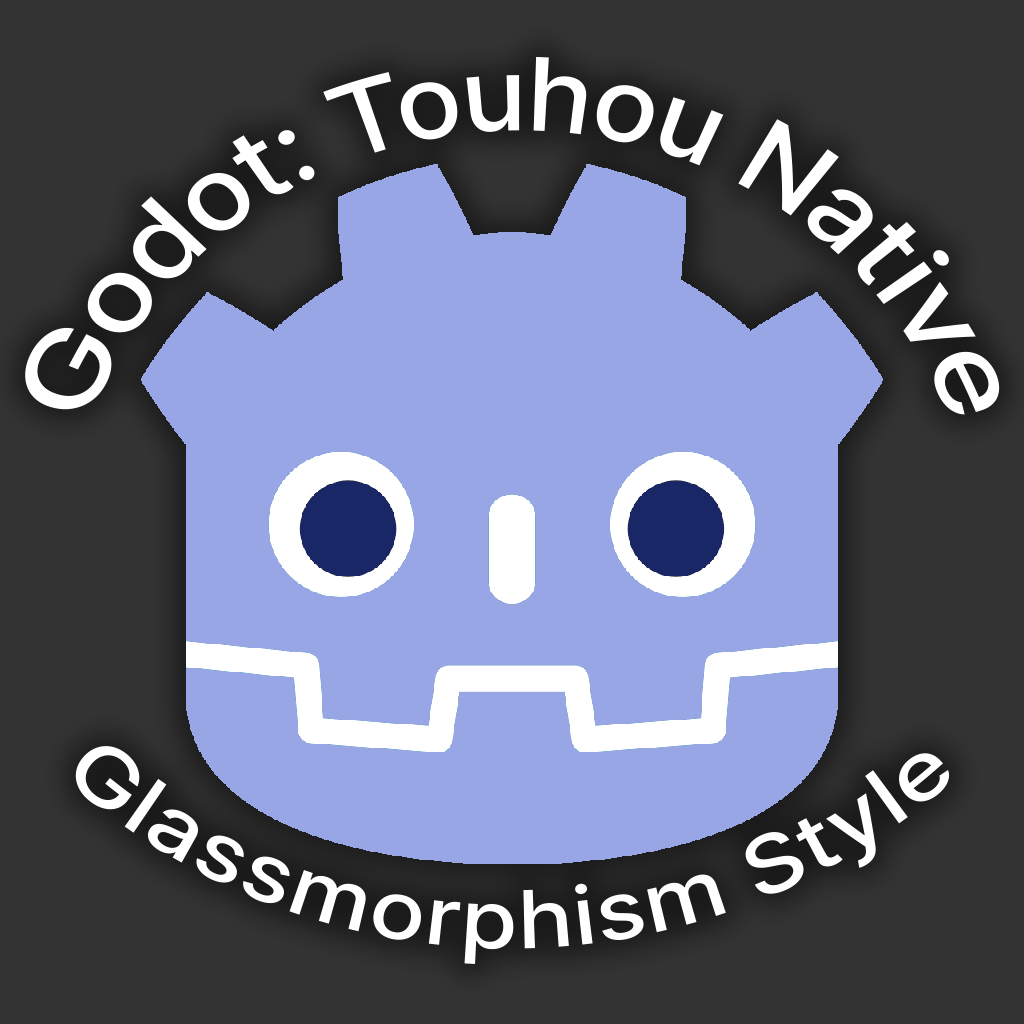
<style>
.page{position:relative;width:1024px;height:1024px;background:#333333}
.page>*{position:absolute;margin:0}
.t1{font:80px "Inter-Medium";color:#ffffff}
</style>
<div class="page">
<p class="t1" style="left:25px;top:56px;width:975px;height:359px">Godot: Touhou Native</p>
<p class="t1" style="left:75px;top:746px;width:875px;height:218px">Glassmorphism Style</p>
</div>
